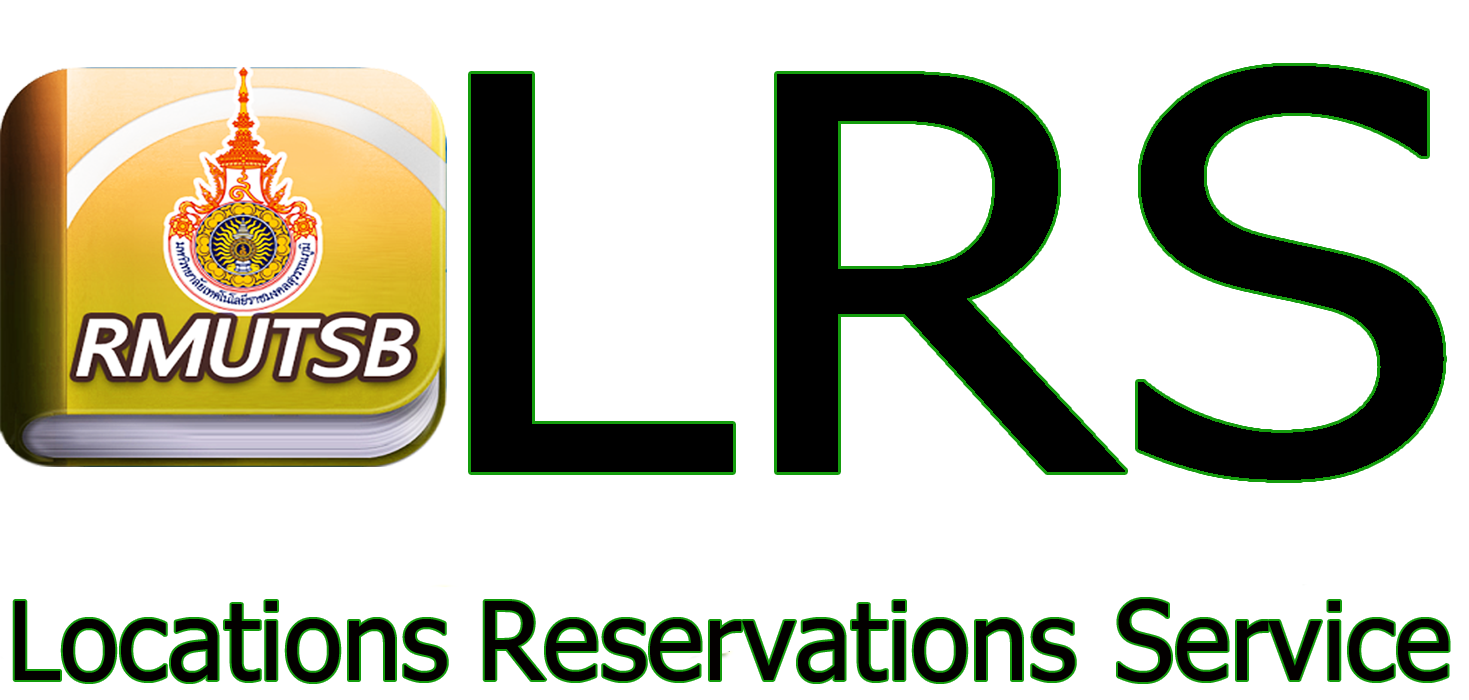
<style>
.page{position:relative;width:1469px;height:700px;background:#ffffff}
.page>*{position:absolute;margin:0}
.t1{font:108.6px "Tahoma";color:#030000}
</style>
<div class="page">
<p class="t1" style="left:14px;top:601px;width:433px;height:81px">Locations</p>
<p class="t1" style="left:484px;top:601px;width:591px;height:81px">Reservations</p>
<p class="t1" style="left:1118px;top:599px;width:331px;height:83px">Service</p>
</div>
